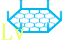
<style>
.page{position:relative;width:73px;height:41px;background:#ffffff}
.page>*{position:absolute;margin:0}
.t1{font:24px "SimSun";color:#e8ff6b;font-weight:bold}
</style>
<div class="page">
<p class="t1" style="left:1px;top:23px;width:24px;height:17px">Lv</p>
</div>
